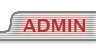
<style>
.page{position:relative;width:96px;height:50px;background:#ffffff}
.page>*{position:absolute;margin:0}
.t1{font:18px "LucidaGrande-Bold";color:#a03939}
</style>
<div class="page">
<p class="t1" style="left:23px;top:19px;width:62px;height:13px">ADMIN</p>
</div>
